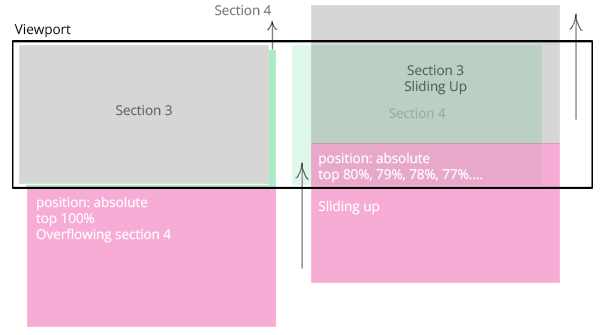
<style>
.page{position:relative;width:600px;height:335px;background:#ffffff}
.page>*{position:absolute;margin:0}
.t1{font:13.4px "OpenSans";color:#737373}
.t2{font:13.4px "OpenSans";color:#000000}
.t3{font:13.4px "OpenSans";color:#545e58}
.t4{font:13.4px "OpenSans";color:#616161}
.t5{font:13.4px "OpenSans";color:#9baca2}
.t6{font:13.4px "OpenSans";color:#ffffff}
</style>
<div class="page">
<p class="t1" style="left:215px;top:4px;width:57px;height:12px">Section 4</p>
<p class="t2" style="left:14px;top:23px;width:57px;height:15px">Viewport</p>
<p class="t3" style="left:404px;top:64px;width:63px;height:31px;text-align:center">Section 3<br>Sliding Up</p>
<p class="t4" style="left:116px;top:104px;width:56px;height:12px">Section 3</p>
<p class="t5" style="left:389px;top:107px;width:57px;height:12px">Section 4</p>
<p class="t6" style="left:318px;top:152px;width:165px;height:63px">position: absolute<br>top 80%, 79%, 78%, 77%....<br><br>Sliding up</p>
<p class="t6" style="left:36px;top:196px;width:135px;height:47px">position: absolute<br>top 100%<br>Overflowing section 4</p>
</div>
